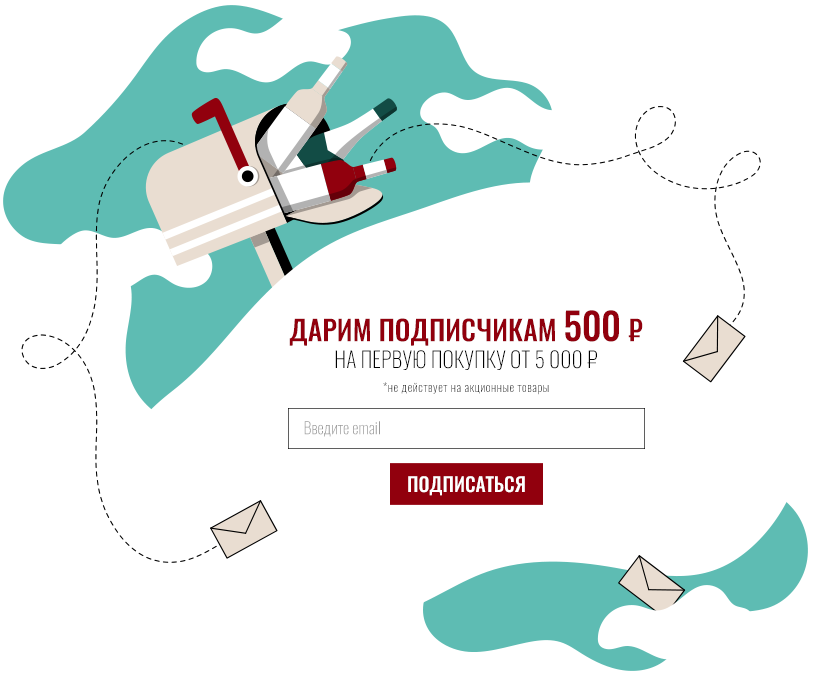
<style>
.page{position:relative;width:813px;height:676px;background:#ffffff}
.page>*{position:absolute;margin:0}
.t1{font:27.8px "Oswald-Medium";color:#91000d;text-transform:uppercase}
.t2{font:37.6px "Oswald-Medium";color:#91000d;text-transform:uppercase}
.t3{font:21.8px "Oswald-ExtraLight";color:#000000;text-transform:uppercase}
.t4{font:12px "Oswald-ExtraLight";letter-spacing:0.05em}
.t5{font:16.3px "Oswald-ExtraLight";color:#999999}
.t6{font:19.5px "Oswald-Medium";color:#ffffff;text-transform:uppercase}
</style>
<div class="page">
<p class="t1" style="left:289px;top:310px;width:354px;height:36px">дарим подписчикам <span class="t2">500</span> ₽</p>
<p class="t3" style="left:335px;top:350px;width:262px;height:20px">на первую покупку от 5 000 ₽</p>
<p class="t4" style="left:383px;top:382px;width:166px;height:13px">*не действует на акционные товары</p>
<p class="t5" style="left:304px;top:421px;width:76px;height:16px">Введите email</p>
<p class="t6" style="left:408px;top:476px;width:117px;height:20px">подписаться</p>
</div>
